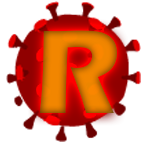
<style>
.page{position:relative;width:144px;height:144px;background:#ffffff}
.page>*{position:absolute;margin:0}
.t1{font:123.3px "ErasITC-Bold";text-transform:uppercase}
</style>
<div class="page">
<p class="t1" style="left:39px;top:30px;width:78px;height:83px">R</p>
</div>
